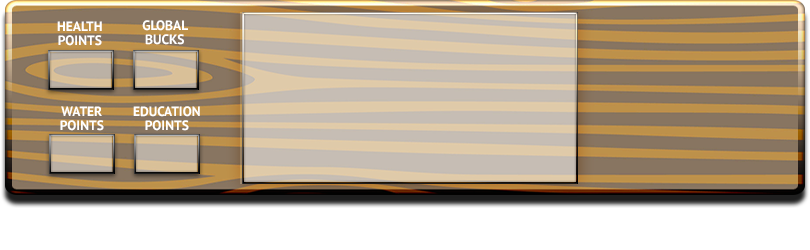
<style>
.page{position:relative;width:810px;height:250px}
.page>*{position:absolute;margin:0}
.t1{font:13.4px/4px "PTSans-Bold";color:#ffffff;text-transform:uppercase}
</style>
<div class="page">
<p class="t1" style="left:57px;top:21px;width:45px;height:25px;text-align:center">HEALTH<br>POINTS</p>
<p class="t1" style="left:142px;top:20px;width:46px;height:25px;text-align:center">GLOBAL<br>BUCKS</p>
<p class="t1" style="left:60px;top:106px;width:44px;height:25px;text-align:center">WATER<br>POINTS</p>
<p class="t1" style="left:133px;top:106px;width:67px;height:25px;text-align:center">EDUCATION<br>POINTS</p>
</div>
